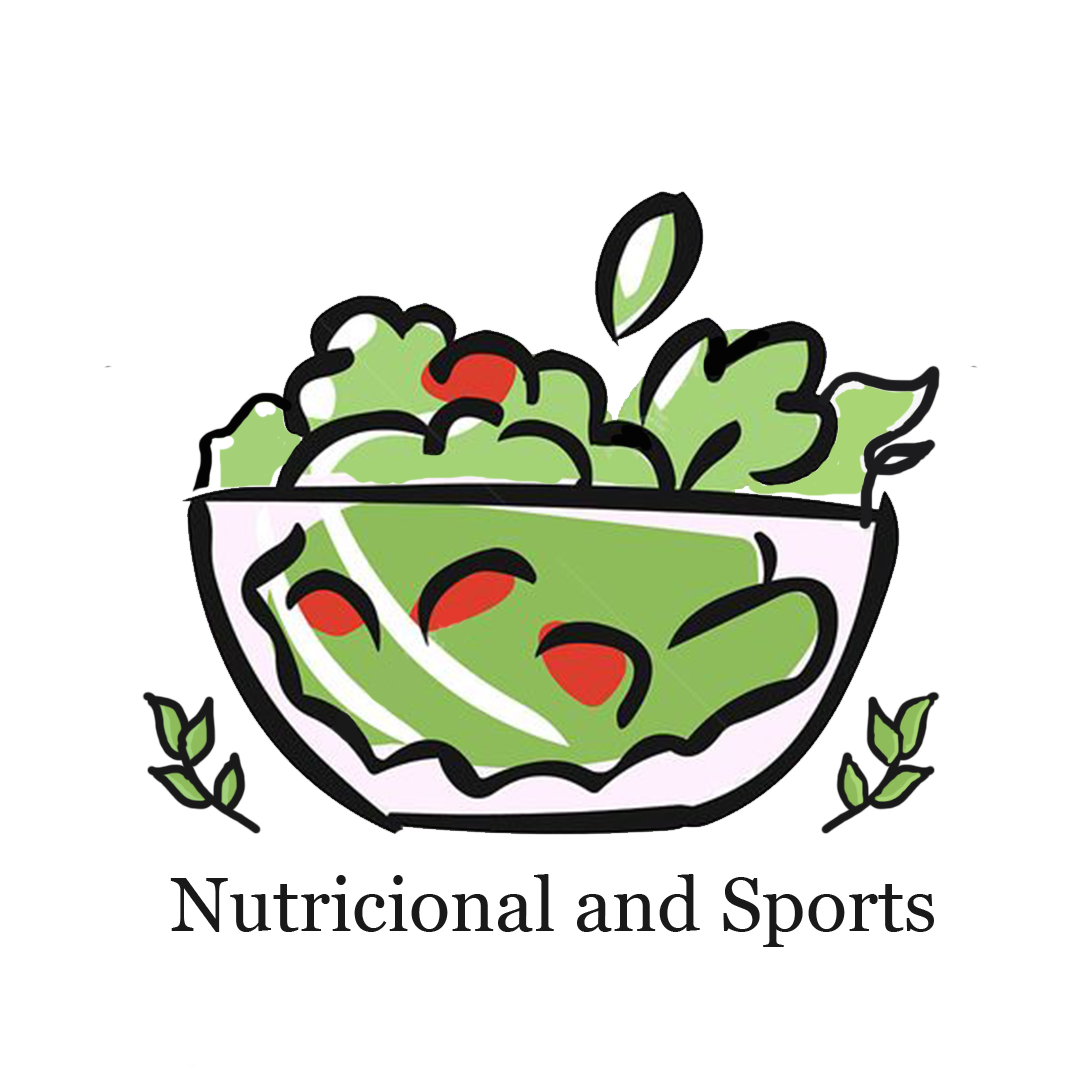
<style>
.page{position:relative;width:1080px;height:1080px;background:#ffffff}
.page>*{position:absolute;margin:0}
.t1{font:76.2px "Georgia";color:#191919}
</style>
<div class="page">
<p class="t1" style="left:170px;top:874px;width:764px;height:73px">Nutricional and Sports</p>
</div>
